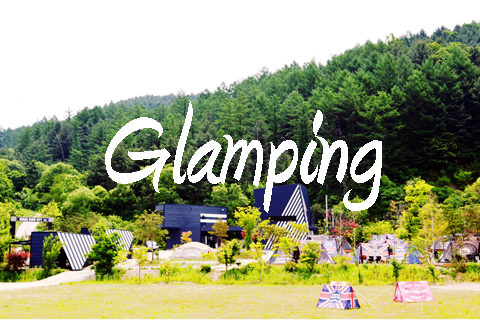
<style>
.page{position:relative;width:480px;height:320px;background:#ffffff}
.page>*{position:absolute;margin:0}
.t1{font:128px "Amienne-Bold";color:#ffffff}
</style>
<div class="page">
<p class="t1" style="left:105px;top:100px;width:277px;height:113px">Glamping</p>
</div>
